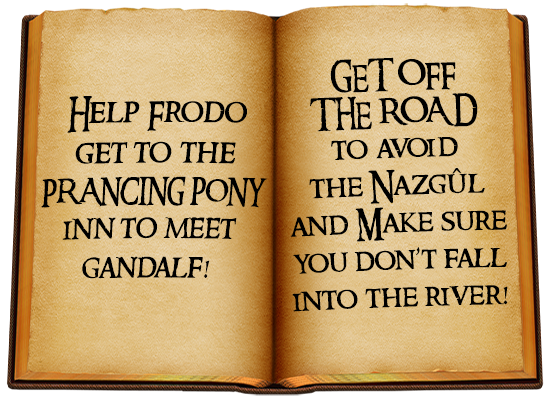
<style>
.page{position:relative;width:550px;height:400px}
.page>*{position:absolute;margin:0}
.t1{font:31.1px "RingbearerMedium";color:#000000}
.t2{font:34px "RingbearerMedium";color:#000000;scale:0.91 1}
.t3{font:27px "RingbearerMedium";color:#000000;scale:0.91 1}
.t4{font:30px "RingbearerMedium";color:#000000;scale:0.91 1}
.t5{font:33px "RingbearerMedium";color:#000000;scale:0.91 1}
.t6{font:31px "RingbearerMedium";color:#000000;scale:0.91 1}
</style>
<div class="page">
<p class="t1" style="left:290px;top:57px;width:218px;height:255px;text-align:center;rotate:-2deg">GET OFF<br>THE ROAD<br>to avoid<br>the Nazgûl<br>and Make sure<br>you don’t fall<br>into the river!</p>
<p class="t2" style="left:41px;top:96px;width:226px;height:183px;text-align:center">Help Frodo<br>get to the<br><span class="t3">P</span><span class="t4">RA</span><span class="t3">NCING PONY<br></span><span class="t5">inn to meet<br>gandalf</span><span class="t6">!</span></p>
</div>
